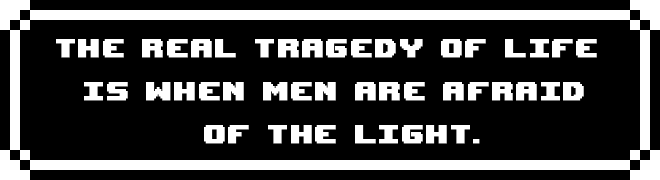
<style>
.page{position:relative;width:660px;height:180px;background:#000000}
.page>*{position:absolute;margin:0}
.t1{font:36px "UpheavalTT-BRK-";letter-spacing:0.05em;color:#ffffff;font-weight:bold}
</style>
<div class="page">
<p class="t1" style="left:56px;top:39px;width:541px;height:105px;text-align:center">the real tragedy of life <br>is when men are afraid<br> of the light.</p>
</div>
